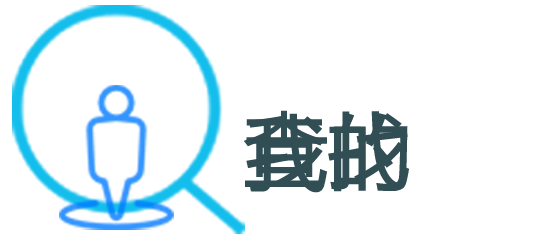
<style>
.page{position:relative;width:547px;height:234px;background:#ffffff}
.page>*{position:absolute;margin:0}
.t1{font:81.8px "MicrosoftYaHei";color:#314e55;font-weight:bold}
.t2{font:81.6px "MicrosoftYaHei";color:#314e55;font-weight:bold}
</style>
<div class="page">
<p class="t1" style="left:244px;top:110px;width:165px;height:80px">查找</p>
<p class="t2" style="left:246px;top:113px;width:162px;height:80px">我的</p>
</div>
